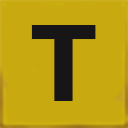
<style>
.page{position:relative;width:128px;height:128px;background:#c8aa10}
.page>*{position:absolute;margin:0}
.t1{font:106.7px "Roboto-Black";color:#171515}
</style>
<div class="page">
<p class="t1" style="left:31px;top:25px;width:65px;height:76px">T</p>
</div>
